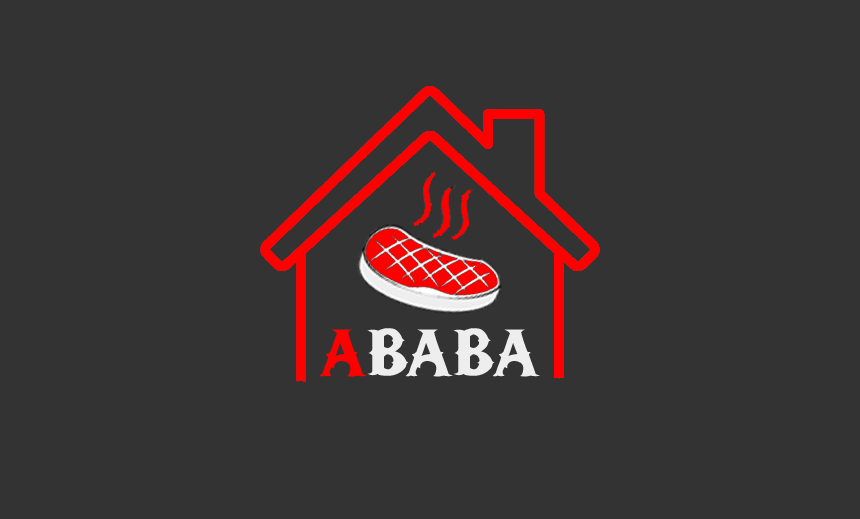
<style>
.page{position:relative;width:860px;height:519px;background:#333333}
.page>*{position:absolute;margin:0}
.t1{font:72px "Fridays";color:#eeeeee}
.t2{font:72px "Fridays";color:#ff0000}
</style>
<div class="page">
<p class="t1" style="left:319px;top:328px;width:221px;height:49px"><span class="t2">A</span>BABA</p>
</div>
